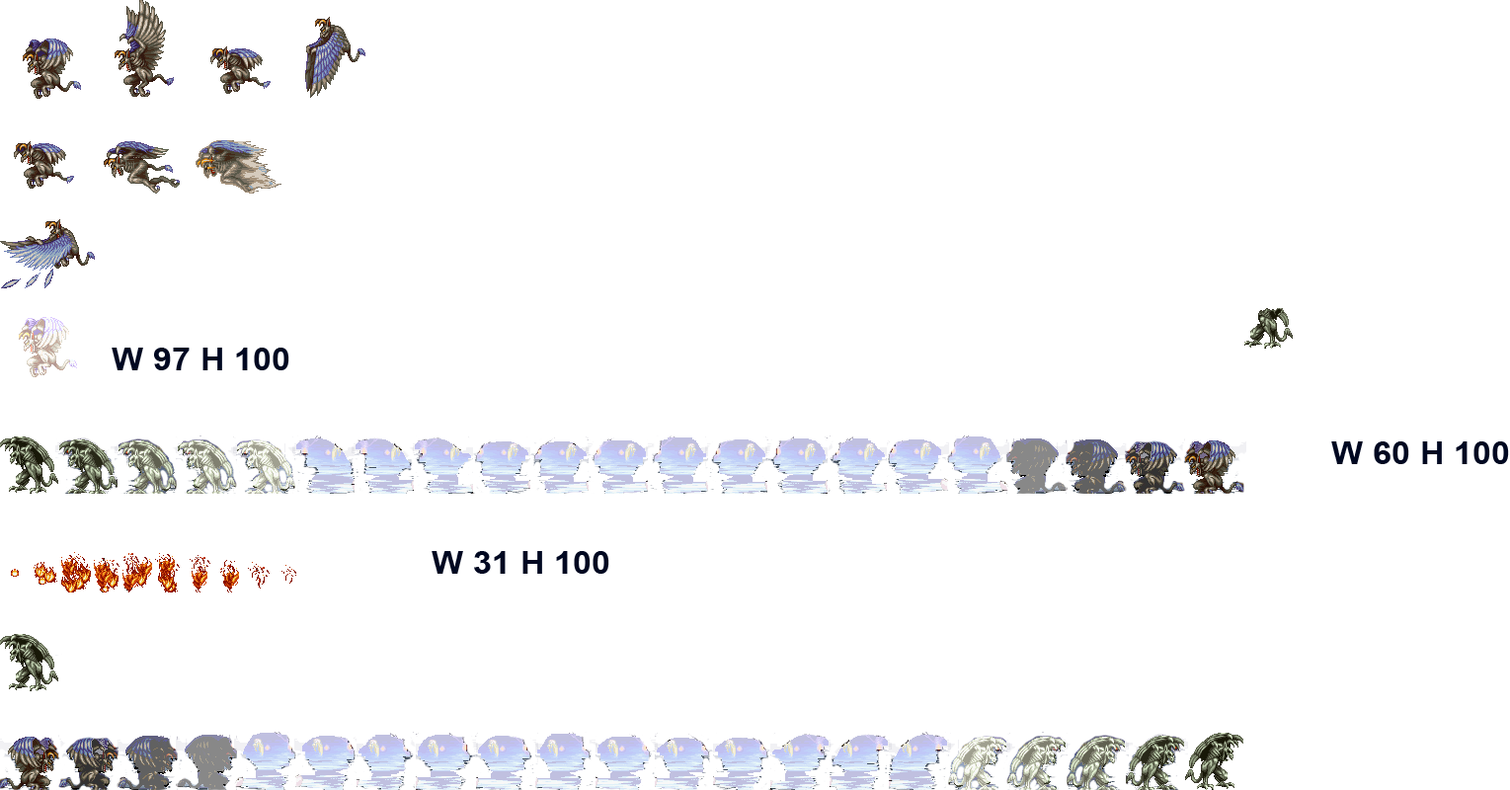
<style>
.page{position:relative;width:1510px;height:790px;background:#ffffff}
.page>*{position:absolute;margin:0}
.t1{font:31.5px "Arial-BoldMT";color:#000821;scale:1.07 1}
</style>
<div class="page">
<p class="t1" style="left:112px;top:348px;width:177px;height:22px">W 97 H 100</p>
<p class="t1" style="left:1331px;top:441px;width:178px;height:23px">W 60 H 100</p>
<p class="t1" style="left:431px;top:551px;width:178px;height:23px">W 31 H 100</p>
</div>
